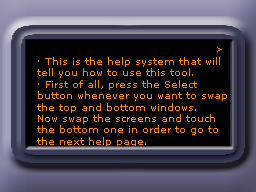
<style>
.page{position:relative;width:256px;height:192px;background:#000000}
.page>*{position:absolute;margin:0}
.t1{font:9px "MSReferenceSansSerif";color:#ff8400}
.t2{font:9.5px "MSReferenceSansSerif";color:#ff8400}
</style>
<div class="page">
<p class="t1" style="left:217px;top:47px;width:5px;height:5px">&gt;</p>
<p class="t2" style="left:37px;top:57px;width:190px;height:90px">· This is the help system that will <br>tell you how to use this tool.<br>· First of all, press the Select <br>button whenever you want to swap <br>the top and bottom windows.<br>Now swap the screens and touch <br>the bottom one in order to go to <br>the next help page.</p>
</div>
